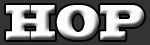
<style>
.page{position:relative;width:150px;height:45px;background:#333333}
.page>*{position:absolute;margin:0}
.t1{font:46px "BlackoakStd";color:#fcfbfb;scale:0.54 1}
</style>
<div class="page">
<p class="t1" style="left:6px;top:5px;width:139px;height:35px">HOP</p>
</div>
